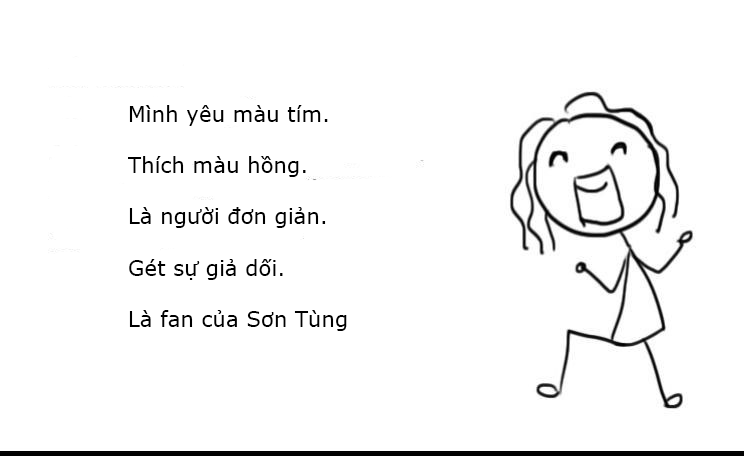
<style>
.page{position:relative;width:744px;height:456px;background:#ffffff}
.page>*{position:absolute;margin:0}
.t1{font:21.3px "MSReferenceSansSerif";color:#000000}
.t2{font:16px "MyriadPro-Regular";color:#000000}
</style>
<div class="page">
<p class="t1" style="left:128px;top:105px;width:219px;height:226px"><span class="t2"><br></span>Mình yêu màu tím. <br><br>Thích màu hồng. <br><br>Là người đơn giản. <br><br>Gét sự giả dối. <br><br>Là fan của Sơn Tùng</p>
</div>
